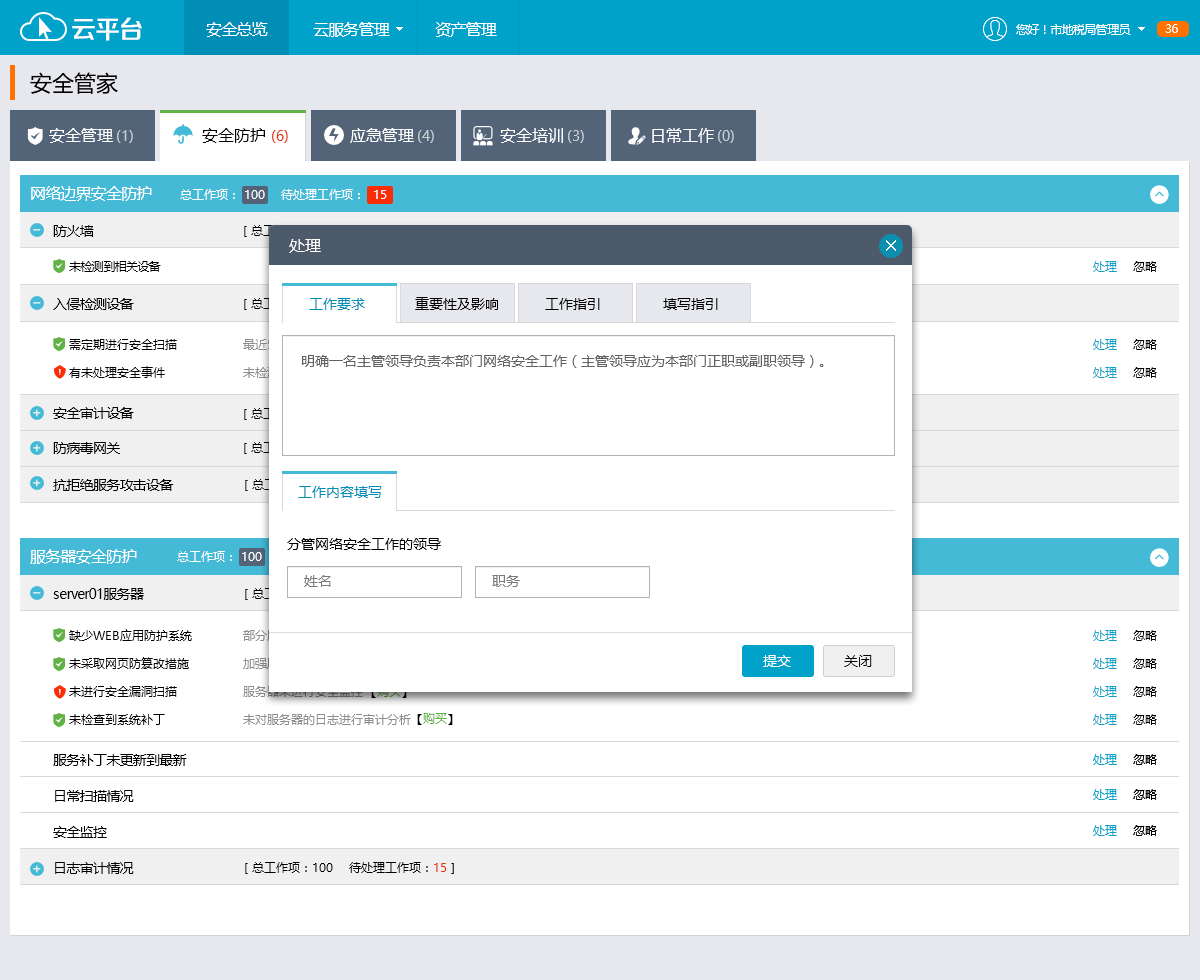
<style>
.page{position:relative;width:1200px;height:980px;background:#ffffff}
.page>*{position:absolute;margin:0}
.t1{font:25.4px "FZZZHONGJW--GB1-0";letter-spacing:-0.05em;color:#ffffff}
.t2{font:16px "MicrosoftYaHei";letter-spacing:-0.05em;color:#ffffff}
.t3{font:12px "MicrosoftYaHei";letter-spacing:-0.05em;color:#ffffff}
.t4{font:22px "MicrosoftYaHei";color:#000000}
.t5{font:16px "MicrosoftYaHei";color:#ffffff}
.t6{font:14px "MicrosoftYaHei";color:#c9cdd2}
.t7{font:16px "MicrosoftYaHei";color:#000000}
.t8{font:14px "MicrosoftYaHei";color:#e73107}
.t9{font:12px "MicrosoftYaHei";color:#ffffff}
.t10{font:14px "MicrosoftYaHei";letter-spacing:-0.05em;color:#000000}
.t11{font:12px "MicrosoftYaHei";letter-spacing:-0.05em;color:#000000}
.t12{font:12px "MicrosoftYaHei";color:#0fa2c6}
.t13{font:12px "MicrosoftYaHei";color:#000000}
.t14{font:14px "MicrosoftYaHei";color:#008eb7}
.t15{font:14px "MicrosoftYaHei";color:#000000}
.t16{font:12px/28px "MicrosoftYaHei";color:#000000}
.t17{font:12px/28px "MicrosoftYaHei";color:#0fa2c6}
.t18{font:14px "MicrosoftYaHei";color:#616161}
.t19{font:14px "MicrosoftYaHei";color:#7a7a7a}
.t20{font:14px "MicrosoftYaHei";color:#ffffff}
.t21{font:12px "MicrosoftYaHei";color:#63b247}
.t22{font:12px "MicrosoftYaHei";color:#e73107}
</style>
<div class="page">
<p class="t1" style="left:72px;top:17px;width:70px;height:24px">云平台</p>
<p class="t2" style="left:206px;top:22px;width:291px;height:15px">安全总览           云服务管理           资产管理</p>
<p class="t3" style="left:1016px;top:24px;width:115px;height:11px">您好！市地税局管理员</p>
<p class="t3" style="left:1165px;top:24px;width:13px;height:9px">36</p>
<p class="t4" style="left:30px;top:72px;width:88px;height:22px">安全管家</p>
<p class="t5" style="left:49px;top:128px;width:64px;height:15px">安全管理</p>
<p class="t6" style="left:117px;top:130px;width:16px;height:13px">(1)</p>
<p class="t7" style="left:202px;top:128px;width:63px;height:15px">安全防护</p>
<p class="t8" style="left:272px;top:130px;width:16px;height:13px">(6)</p>
<p class="t5" style="left:350px;top:128px;width:64px;height:15px">应急管理</p>
<p class="t6" style="left:418px;top:130px;width:16px;height:13px">(4)</p>
<p class="t5" style="left:500px;top:128px;width:63px;height:15px">安全培训</p>
<p class="t6" style="left:568px;top:130px;width:16px;height:13px">(3)</p>
<p class="t5" style="left:652px;top:128px;width:62px;height:15px">日常工作</p>
<p class="t6" style="left:718px;top:130px;width:16px;height:13px">(0)</p>
<p class="t2" style="left:31px;top:186px;width:121px;height:15px">网络边界安全防护</p>
<p class="t9" style="left:180px;top:189px;width:207px;height:11px">总工作项： 100    待处理工作项：  15</p>
<p class="t10" style="left:53px;top:225px;width:41px;height:12px">防火墙</p>
<p class="t5" style="left:289px;top:239px;width:32px;height:14px">处理</p>
<p class="t11" style="left:69px;top:261px;width:92px;height:11px">未检测到相关设备</p>
<p class="t12" style="left:1093px;top:261px;width:64px;height:11px">处理<span class="t13">    忽略</span></p>
<p class="t10" style="left:53px;top:298px;width:81px;height:12px">入侵检测设备</p>
<p class="t14" style="left:309px;top:298px;width:56px;height:12px">工作要求</p>
<p class="t15" style="left:415px;top:297px;width:83px;height:13px">重要性及影响</p>
<p class="t15" style="left:545px;top:298px;width:55px;height:12px">工作指引</p>
<p class="t15" style="left:663px;top:298px;width:55px;height:12px">填写指引</p>
<p class="t16" style="left:69px;top:339px;width:108px;height:39px">需定期进行安全扫描<br>有未处理安全事件</p>
<p class="t17" style="left:1093px;top:339px;width:64px;height:39px">处理<span class="t16">    忽略<br></span>处理<span class="t16">    忽略</span></p>
<p class="t18" style="left:302px;top:355px;width:522px;height:13px">明确一名主管领导负责本部门网络安全工作（主管领导应为本部门正职或副职领导）。</p>
<p class="t10" style="left:53px;top:407px;width:81px;height:12px">安全审计设备</p>
<p class="t10" style="left:53px;top:442px;width:67px;height:12px">防病毒网关</p>
<p class="t10" style="left:53px;top:479px;width:121px;height:12px">抗拒绝服务攻击设备</p>
<p class="t14" style="left:298px;top:486px;width:84px;height:12px">工作内容填写</p>
<p class="t15" style="left:287px;top:538px;width:154px;height:12px">分管网络安全工作的领导</p>
<p class="t2" style="left:30px;top:549px;width:107px;height:15px">服务器安全防护</p>
<p class="t9" style="left:177px;top:551px;width:207px;height:11px">总工作项： 100    待处理工作项：  15</p>
<p class="t19" style="left:304px;top:575px;width:27px;height:12px">姓名</p>
<p class="t19" style="left:492px;top:575px;width:28px;height:12px">职务</p>
<p class="t10" style="left:53px;top:588px;width:91px;height:12px">server01服务器</p>
<p class="t16" style="left:69px;top:629px;width:123px;height:96px">缺少WEB应用防护系统<br>未采取网页防篡改措施<br>未进行安全漏洞扫描<br>未检查到系统补丁</p>
<p class="t17" style="left:1093px;top:630px;width:64px;height:95px">处理<span class="t16">    忽略<br></span>处理<span class="t16">    忽略<br></span>处理<span class="t16">    忽略<br></span>处理<span class="t16">    忽略</span></p>
<p class="t20" style="left:763px;top:655px;width:28px;height:12px">提交</p>
<p class="t15" style="left:844px;top:655px;width:28px;height:12px">关闭</p>
<p class="t21" style="left:417px;top:713px;width:36px;height:12px"><span class="t13">【</span>购买<span class="t13">】</span></p>
<p class="t10" style="left:53px;top:754px;width:134px;height:12px">服务补丁未更新到最新</p>
<p class="t10" style="left:55px;top:790px;width:79px;height:12px">日常扫描情况</p>
<p class="t10" style="left:53px;top:826px;width:54px;height:12px">安全监控</p>
<p class="t10" style="left:55px;top:862px;width:79px;height:12px">日志审计情况</p>
<p class="t13" style="left:245px;top:862px;width:209px;height:12px">[ 总工作项：100    待处理工作项：<span class="t22">15 </span>]</p>
</div>
